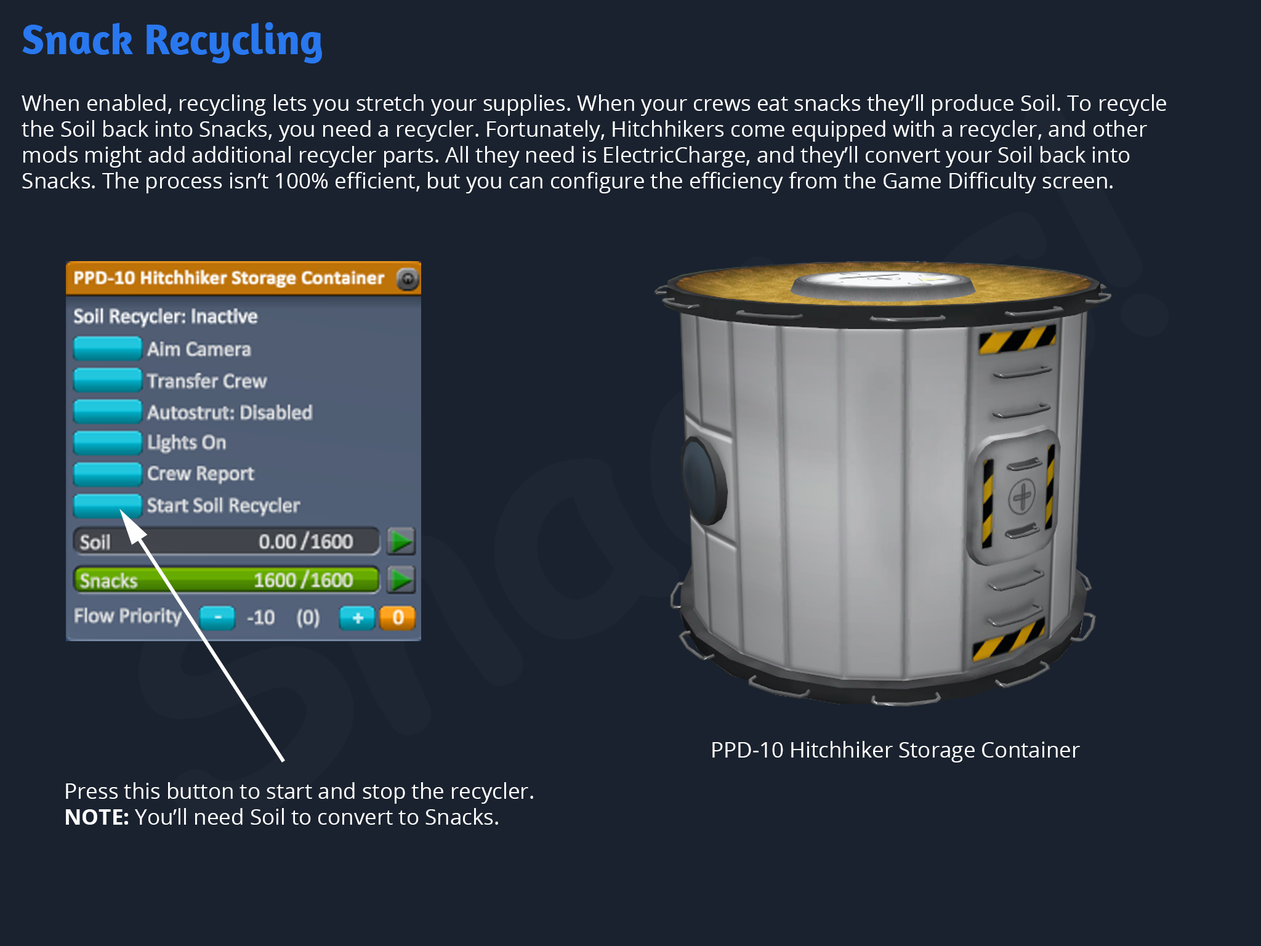
<style>
.page{position:relative;width:1261px;height:946px;background:#1a222f}
.page>*{position:absolute;margin:0}
.t1{font:43.1px "Amaranth-Bold";color:#2978ef}
.t2{font:21.5px "OpenSans";color:#ffffff}
.t3{font:21.5px "OpenSans-Bold";color:#ffffff}
</style>
<div class="page">
<p class="t1" style="left:22px;top:22px;width:300px;height:41px">Snack Recycling</p>
<p class="t2" style="left:22px;top:94px;width:1144px;height:99px">When enabled, recycling lets you stretch your supplies. When your crews eat snacks they’ll produce Soil. To recycle the Soil back into Snacks, you need a recycler. Fortunately, Hitchhikers come equipped with a recycler, and other mods might add additional recycler parts. All they need is ElectricCharge, and they’ll convert your Soil back into Snacks. The process isn’t 100% efficient, but you can configure the efficiency from the Game Difficulty screen.</p>
<p class="t2" style="left:712px;top:741px;width:368px;height:21px">PPD-10 Hitchhiker Storage Container</p>
<p class="t2" style="left:66px;top:782px;width:467px;height:42px">Press this button to start and stop the recycler.<br><span class="t3">NOTE:</span> You’ll need Soil to convert to Snacks.</p>
</div>
